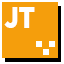
<style>
.page{position:relative;width:64px;height:64px;background:#f59e0c}
.page>*{position:absolute;margin:0}
.t1{font:30px "GothamBlack";color:#ffffff;scale:0.82 1}
</style>
<div class="page">
<p class="t1" style="left:4px;top:7px;width:31px;height:21px">JT</p>
</div>
